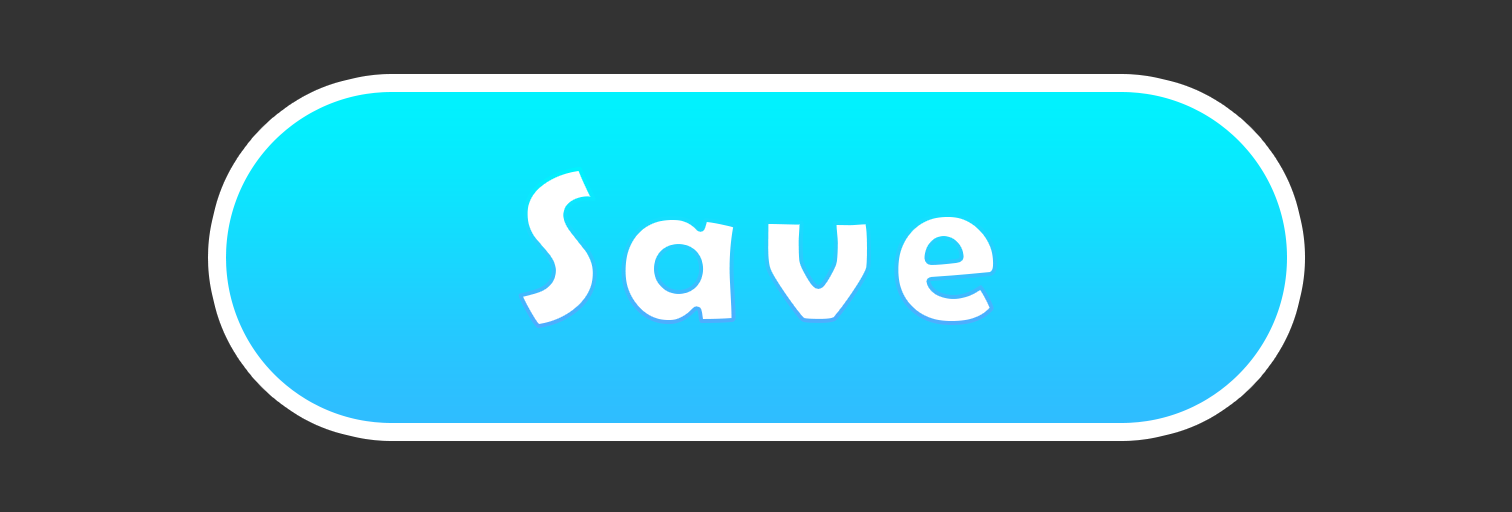
<style>
.page{position:relative;width:1512px;height:512px;background:#333333}
.page>*{position:absolute;margin:0}
.t1{font:218.9px "BerlinSansFBDemi-Bold";letter-spacing:0.06em;color:#ffffff}
</style>
<div class="page">
<p class="t1" style="left:518px;top:167px;width:480px;height:161px">Save</p>
</div>
